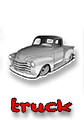
<style>
.page{position:relative;width:84px;height:120px;background:#ffffff}
.page>*{position:absolute;margin:0}
.t1{font:15.6px "Chalkduster";color:#ff0707;scale:1.27 1}
</style>
<div class="page">
<p class="t1" style="left:11px;top:98px;width:61px;height:14px">truck</p>
</div>
